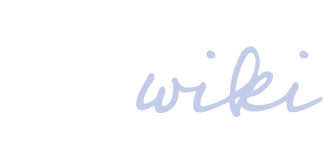
<style>
.page{position:relative;width:323px;height:151px;background:#ffffff}
.page>*{position:absolute;margin:0}
.t1{font:108px "Professor";color:#c2cbe8}
</style>
<div class="page">
<p class="t1" style="left:136px;top:46px;width:187px;height:71px">wiki</p>
</div>
